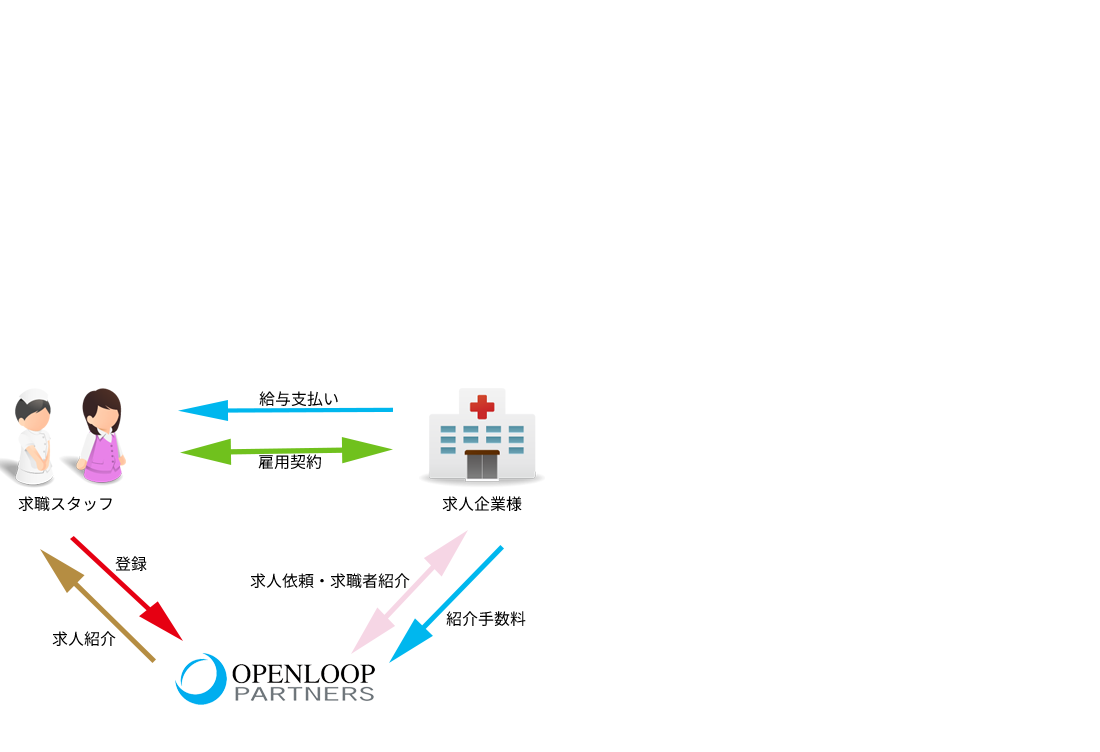
<style>
.page{position:relative;width:1100px;height:752px;background:#ffffff}
.page>*{position:absolute;margin:0}
.t1{font:16px "Nasu-Regular";color:#000000}
</style>
<div class="page">
<p class="t1" style="left:259px;top:391px;width:79px;height:15px">給与支払い</p>
<p class="t1" style="left:258px;top:454px;width:63px;height:15px">雇用契約</p>
<p class="t1" style="left:18px;top:496px;width:94px;height:15px">求職スタッフ</p>
<p class="t1" style="left:442px;top:496px;width:80px;height:15px">求人企業様</p>
<p class="t1" style="left:115px;top:556px;width:32px;height:15px">登録</p>
<p class="t1" style="left:250px;top:573px;width:160px;height:15px">求人依頼・求職者紹介</p>
<p class="t1" style="left:446px;top:611px;width:80px;height:15px">紹介手数料</p>
<p class="t1" style="left:52px;top:631px;width:64px;height:15px">求人紹介</p>
</div>
